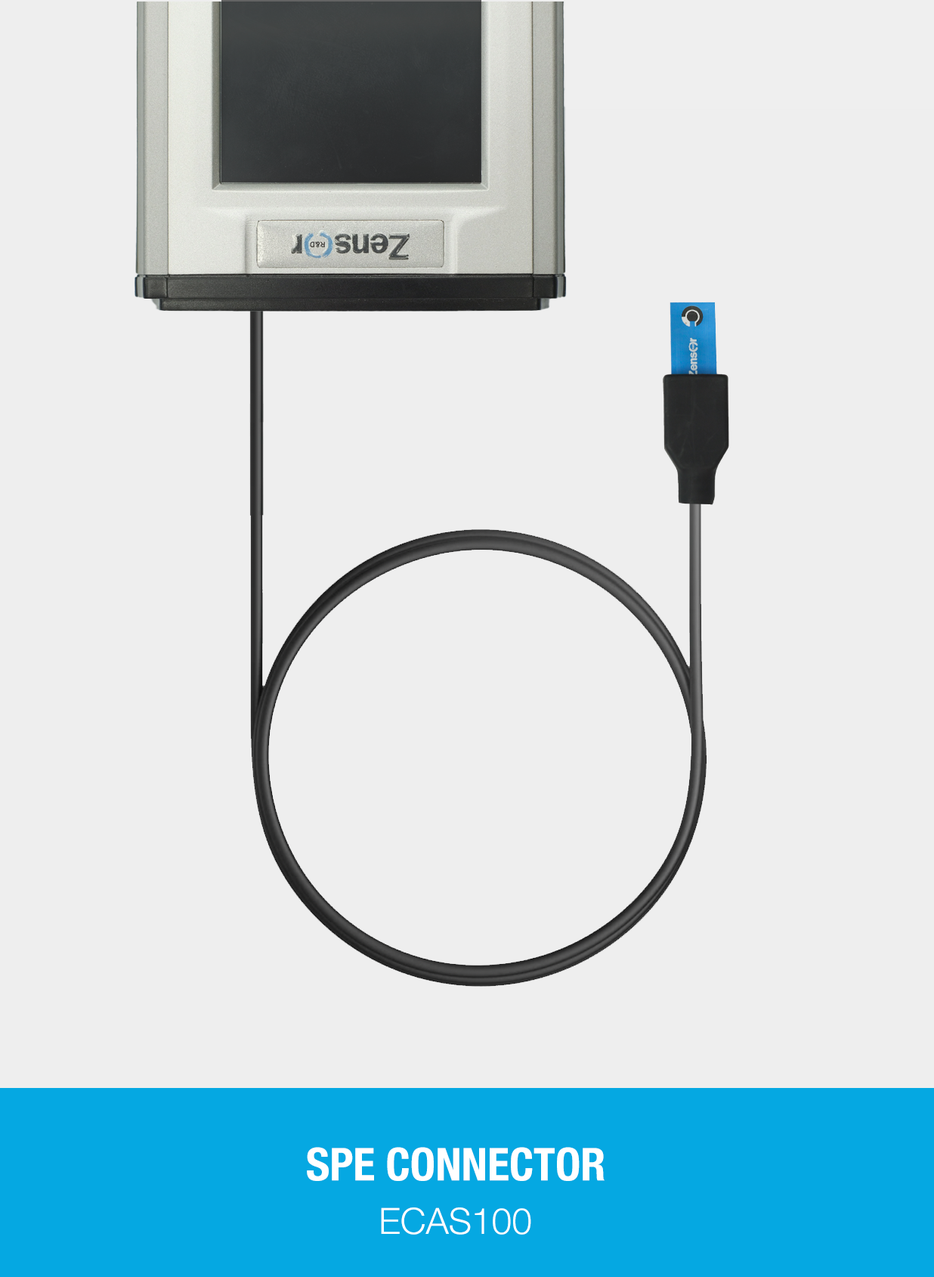
<style>
.page{position:relative;width:934px;height:1277px;background:#eeeeee}
.page>*{position:absolute;margin:0}
.t1{font:45.3px "HelveticaNeue-CondensedBold";color:#ffffff}
.t2{font:36.3px "HelveticaNeue-Light";color:#ffffff}
</style>
<div class="page">
<p class="t1" style="left:307px;top:1147px;width:298px;height:34px">SPE CONNECTOR</p>
<p class="t2" style="left:381px;top:1207px;width:150px;height:27px">ECAS100</p>
</div>
